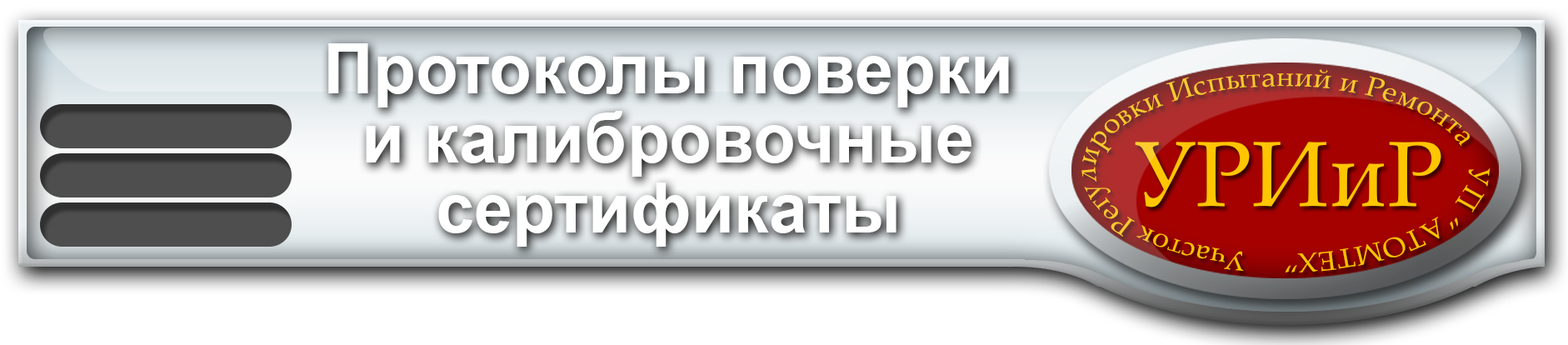
<style>
.page{position:relative;width:1568px;height:345px}
.page>*{position:absolute;margin:0}
.t1{font:69.4px/69.4px "Arial-BoldMT";color:#eaeff1}
.t2{font:27.1px "PalatinoLinotype-Roman";scale:1.09 1}
.t3{font:92.6px "PalatinoLinotype-Roman";color:#ffc600}
</style>
<div class="page">
<p class="t1" style="left:328px;top:43px;width:681px;height:204px;text-align:center">Протоколы поверки<br>и калибровочные<br>сертификаты</p>
<p class="t2" style="left:1081px;top:69px;width:410px;height:203px;text-align:center">Участок Регулировки Испытаний и Ремонта   УП “АТОМТЕХ”</p>
<p class="t3" style="left:1135px;top:142px;width:306px;height:65px">УРИиР</p>
</div>
